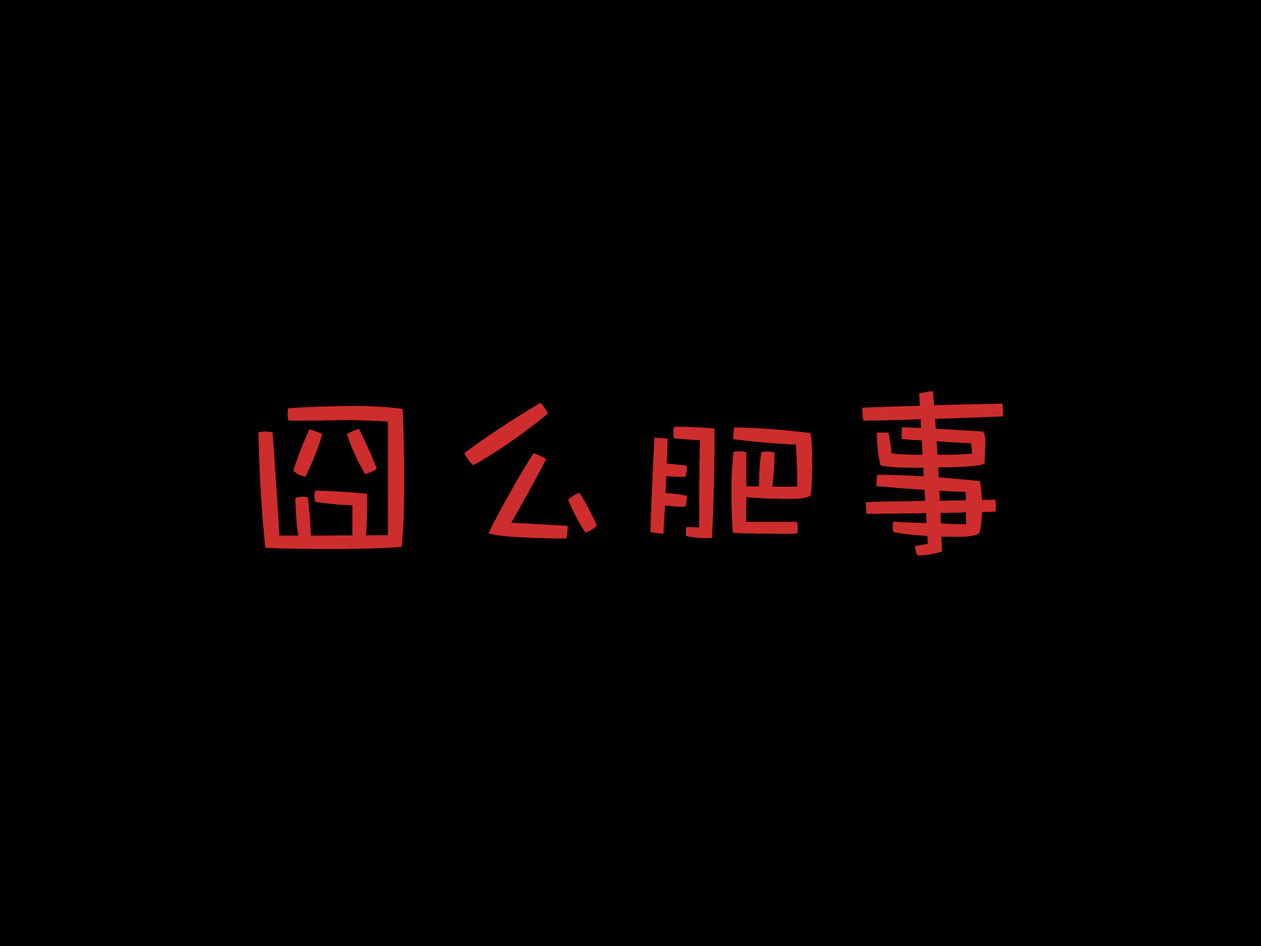
<style>
.page{position:relative;width:1261px;height:946px;background:#000000}
.page>*{position:absolute;margin:0}
.t1{font:200.2px "DFWaWaSC-W5";color:#ce2d2d}
</style>
<div class="page">
<p class="t1" style="left:258px;top:391px;width:746px;height:164px">囧么肥事</p>
</div>
